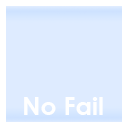
<style>
.page{position:relative;width:128px;height:128px;background:#deebff}
.page>*{position:absolute;margin:0}
.t1{font:25px "CenturyGothic-Bold";color:#ffffff}
</style>
<div class="page">
<p class="t1" style="left:24px;top:97px;width:79px;height:18px">No Fail</p>
</div>
